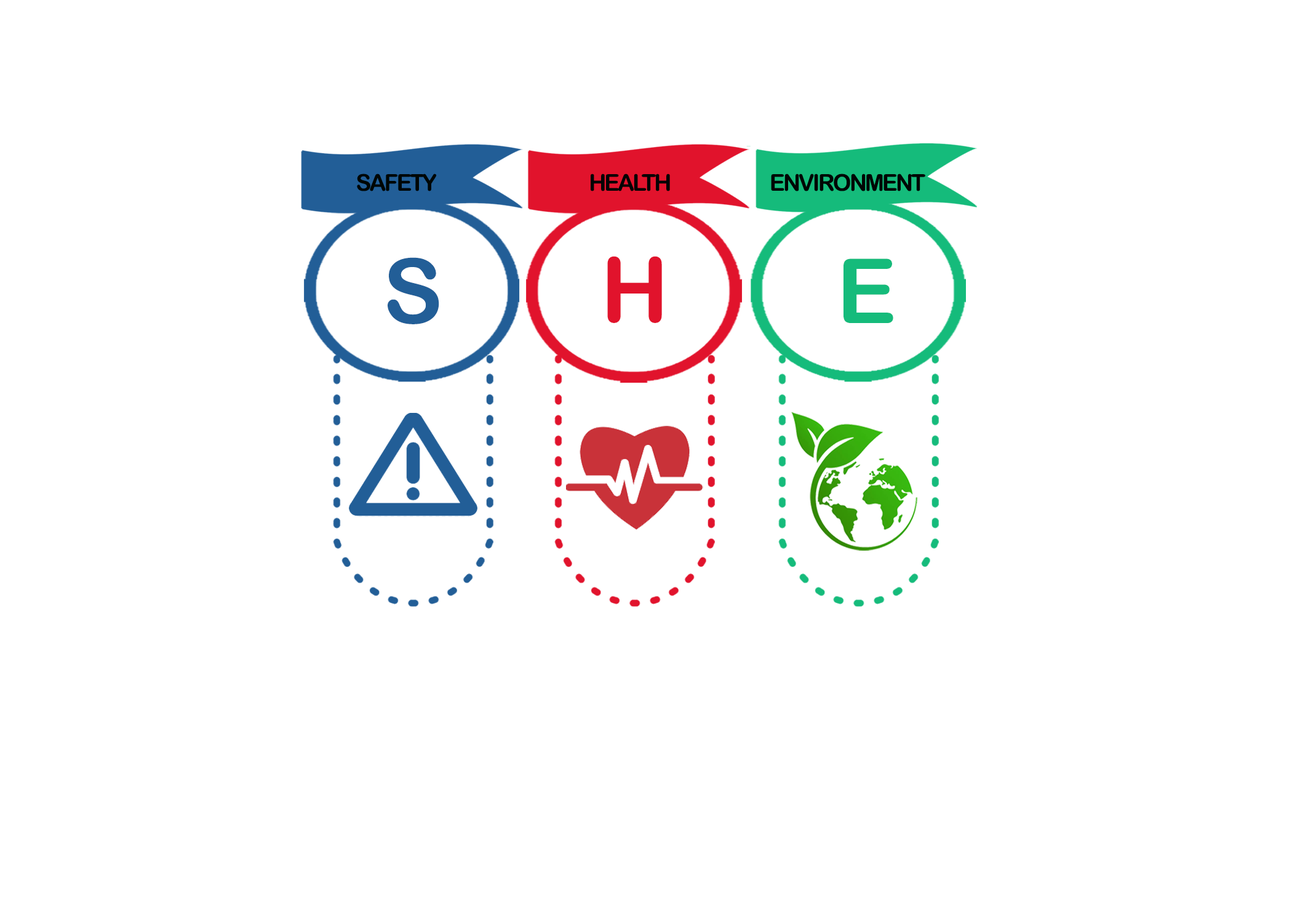
<style>
.page{position:relative;width:1292px;height:923px;background:#ffffff}
.page>*{position:absolute;margin:0}
.t1{font:23.1px "ArialRoundedMTBold";letter-spacing:-0.08em;color:#000604}
.t2{font:23.1px "ArialRoundedMTBold";letter-spacing:-0.08em;color:#000405}
.t3{font:23.1px "ArialRoundedMTBold";letter-spacing:-0.08em;color:#010604}
.t4{font:89.7px "ArialRoundedMTBold";letter-spacing:-0.08em;color:#225e97}
.t5{font:89.7px "ArialRoundedMTBold";letter-spacing:-0.08em;color:#e1132c}
.t6{font:89.7px "ArialRoundedMTBold";letter-spacing:-0.08em;color:#15bb7b}
</style>
<div class="page">
<p class="t1" style="left:357px;top:174px;width:80px;height:17px">SAFETY</p>
<p class="t2" style="left:591px;top:174px;width:79px;height:17px">HEALTH</p>
<p class="t3" style="left:771px;top:174px;width:154px;height:17px">ENVIRONMENT</p>
<p class="t4" style="left:388px;top:257px;width:51px;height:67px">S</p>
<p class="t5" style="left:607px;top:256px;width:55px;height:67px">H</p>
<p class="t6" style="left:844px;top:258px;width:49px;height:65px">E</p>
</div>
